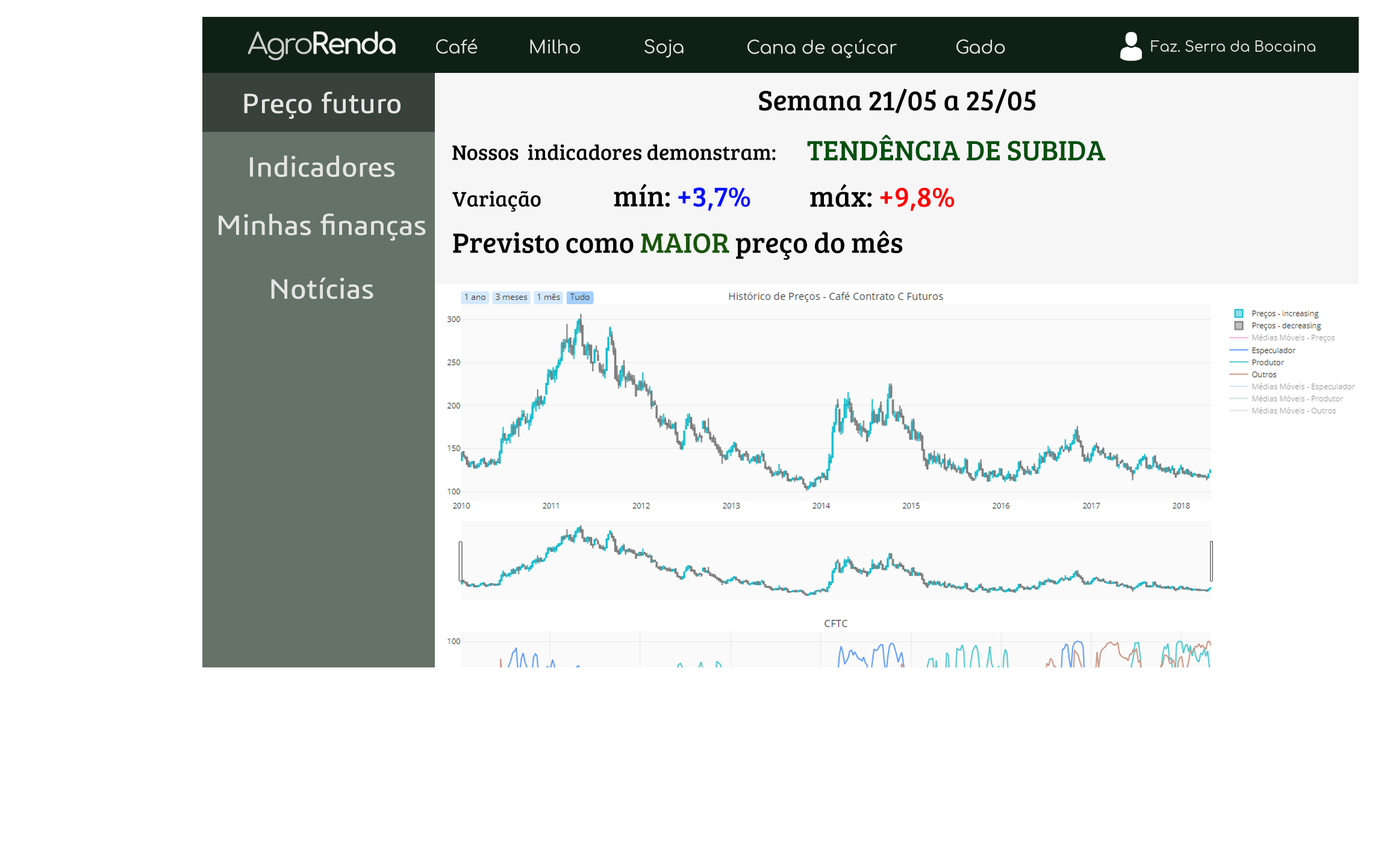
<style>
.page{position:relative;width:1378px;height:865px;background:#ffffff}
.page>*{position:absolute;margin:0}
.t1{font:18.1px "Comfortaa-Regular";color:#e5e5e5}
.t2{font:14.5px "Comfortaa-Regular";color:#e5e5e5}
.t3{font:28.9px "BreeSerif-Regular";color:#000000}
.t4{font:28.9px "3ds";color:#e5e5e5}
.t5{font:28.9px "BreeSerif-Regular";color:#04500f}
.t6{font:21.7px "BreeSerif-Regular";color:#000000}
.t7{font:28.9px "BreeSerif-Regular";color:#0012fe}
.t8{font:28.9px "BreeSerif-Regular";color:#ff0000}
.t9{font:28.9px "BreeSerif-Regular";color:#19560b}
</style>
<div class="page">
<p class="t1" style="left:436px;top:39px;width:42px;height:15px">Café</p>
<p class="t1" style="left:530px;top:39px;width:50px;height:15px">Milho</p>
<p class="t1" style="left:645px;top:39px;width:39px;height:19px">Soja</p>
<p class="t1" style="left:748px;top:39px;width:149px;height:19px">Cana de açúcar</p>
<p class="t1" style="left:957px;top:39px;width:48px;height:15px">Gado</p>
<p class="t2" style="left:1151px;top:40px;width:165px;height:12px">Faz. Serra da Bocaina</p>
<p class="t3" style="left:759px;top:89px;width:277px;height:25px">Semana 21/05 a 25/05</p>
<p class="t4" style="left:244px;top:92px;width:157px;height:27px">Preço futuro</p>
<p class="t5" style="left:807px;top:134px;width:299px;height:27px">TENDÊNCIA DE SUBIDA</p>
<p class="t6" style="left:452px;top:144px;width:324px;height:16px">Nossos  indicadores demonstram:</p>
<p class="t4" style="left:250px;top:155px;width:145px;height:22px">Indicadores</p>
<p class="t7" style="left:614px;top:184px;width:137px;height:27px"><span class="t3">mín: </span>+3,7%</p>
<p class="t8" style="left:810px;top:184px;width:145px;height:27px"><span class="t3">máx: </span>+9,8%</p>
<p class="t6" style="left:452px;top:191px;width:89px;height:21px">Variação</p>
<p class="t4" style="left:219px;top:213px;width:207px;height:28px">Minhas finanças</p>
<p class="t3" style="left:453px;top:230px;width:450px;height:30px">Previsto como <span class="t9">MAIOR</span> preço do mês</p>
<p class="t4" style="left:271px;top:277px;width:103px;height:22px">Notícias</p>
</div>
